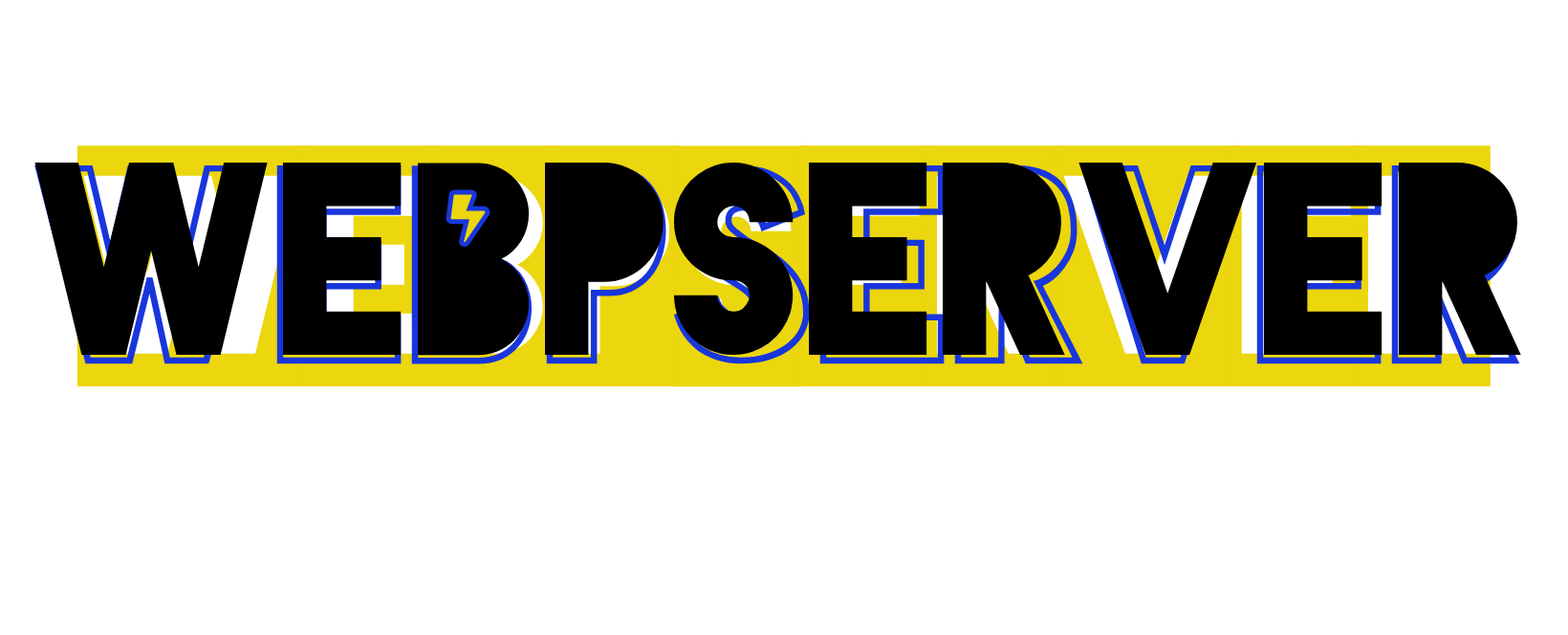
<style>
.page{position:relative;width:1568px;height:635px;background:#ffffff}
.page>*{position:absolute;margin:0}
.t1{font:286.8px "Blackout-2AM"}
.t2{font:258.1px "Blackout-Midnight";color:#000000}
</style>
<div class="page">
<p class="t1" style="left:76px;top:145px;width:1415px;height:242px">WEBPSERVER</p>
<p class="t2" style="left:34px;top:163px;width:1487px;height:193px">WEBPSERVER</p>
</div>
